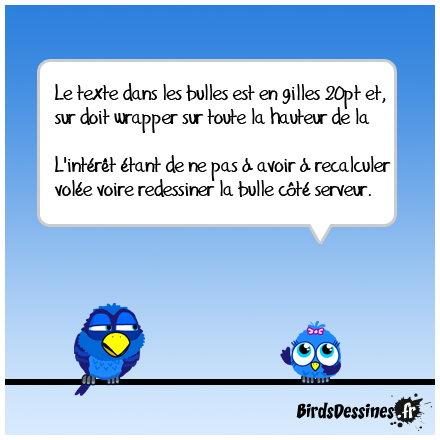
<style>
.page{position:relative;width:440px;height:440px;background:#ffffff}
.page>*{position:absolute;margin:0}
.t1{font:20px "Gilles'ComicFont";color:#000000}
</style>
<div class="page">
<p class="t1" style="left:54px;top:83px;width:337px;height:114px">Le texte dans les bulles est en gilles 20pt et, <br>sur doit wrapper sur toute la hauteur de la <br><br>L'intérêt étant de ne pas à avoir à recalculer<br>volée voire redessiner la bulle côté serveur.</p>
</div>
